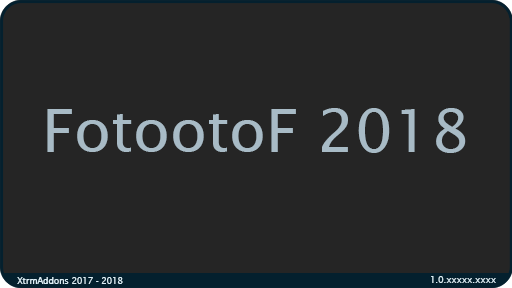
<style>
.page{position:relative;width:512px;height:288px;background:#252525}
.page>*{position:absolute;margin:0}
.t1{font:60px "LucidaSansUnicode";color:#a8bbc6}
.t2{font:8.5px "LucidaSans";color:#dbeef6}
</style>
<div class="page">
<p class="t1" style="left:47px;top:108px;width:419px;height:45px">FotootoF 2018</p>
<p class="t2" style="left:17px;top:277px;width:106px;height:7px">XtrmAddons 2017 - 2018</p>
<p class="t2" style="left:431px;top:276px;width:65px;height:7px">1.0.xxxxx.xxxx</p>
</div>
